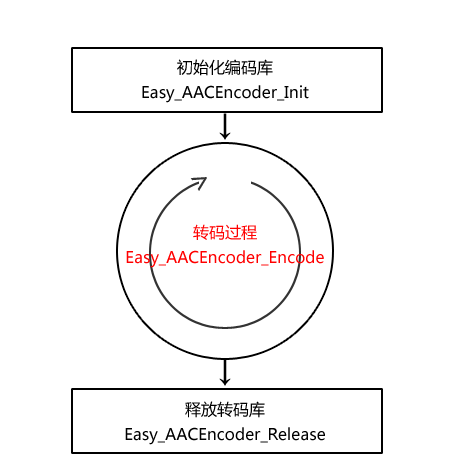
<style>
.page{position:relative;width:466px;height:472px;background:#ffffff}
.page>*{position:absolute;margin:0}
.t1{font:16px/24.6px "MicrosoftYaHei";color:#000000}
.t2{font:30px "MicrosoftYaHei";color:#000000}
.t3{font:30px "MicrosoftYaHei";color:#333333}
.t4{font:16px/24.6px "MicrosoftYaHei";color:#ff0000}
</style>
<div class="page">
<p class="t1" style="left:142px;top:59px;width:167px;height:44px;text-align:center">初始化编码库<br>Easy_AACEncoder_Init</p>
<p class="t2" style="left:219px;top:113px;width:12px;height:27px">↓</p>
<p class="t3" style="left:190px;top:177px;width:17px;height:14px;rotate:-33deg">&gt;</p>
<p class="t4" style="left:126px;top:224px;width:198px;height:44px;text-align:center">转码过程<br>Easy_AACEncoder_Encode</p>
<p class="t2" style="left:219px;top:359px;width:12px;height:27px">↓</p>
<p class="t1" style="left:125px;top:401px;width:200px;height:44px;text-align:center">释放转码库<br>Easy_AACEncoder_Release</p>
</div>
